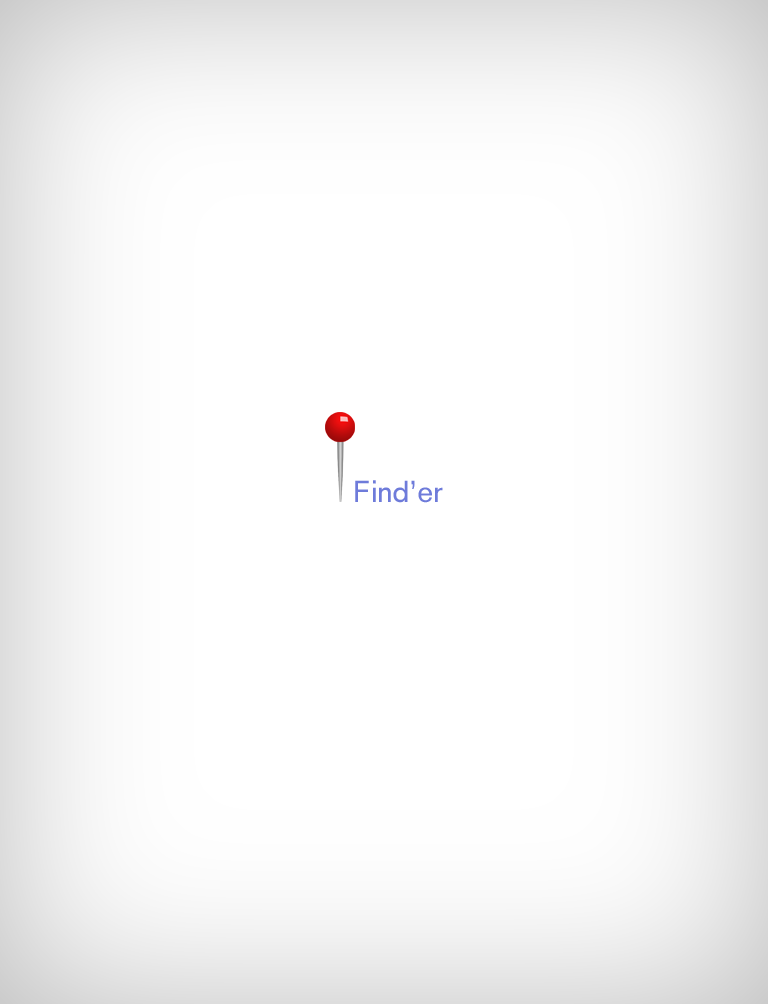
<style>
.page{position:relative;width:768px;height:1004px;background:#ffffff}
.page>*{position:absolute;margin:0}
.t1{font:30px "AkzidenzGrotesk-Roman";color:#6e7bda}
</style>
<div class="page">
<p class="t1" style="left:355px;top:480px;width:88px;height:23px">Find’er</p>
</div>
